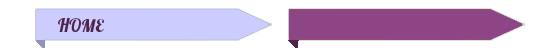
<style>
.page{position:relative;width:550px;height:50px;background:#ffffff}
.page>*{position:absolute;margin:0}
.t1{font:18px "Lobster1.3";color:#4d2548}
</style>
<div class="page">
<p class="t1" style="left:58px;top:18px;width:46px;height:14px">HOME</p>
</div>
